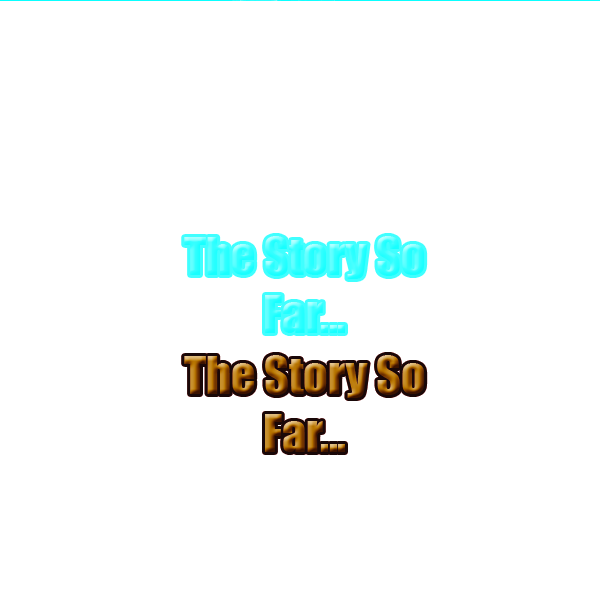
<style>
.page{position:relative;width:600px;height:600px;background:#ffffff}
.page>*{position:absolute;margin:0}
.t1{font:48px "Impact"}
</style>
<div class="page">
<p class="t1" style="left:184px;top:235px;width:241px;height:97px;text-align:center">The Story So<br>Far...</p>
</div>
